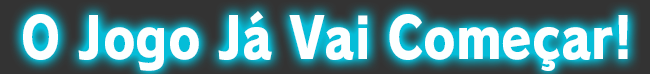
<style>
.page{position:relative;width:650px;height:74px}
.page>*{position:absolute;margin:0}
.t1{font:56px "RodinPro-EB";color:#fdffff;scale:0.88 1}
</style>
<div class="page">
<p class="t1" style="left:23px;top:11px;width:605px;height:60px">O Jogo Já Vai Começar!</p>
</div>
